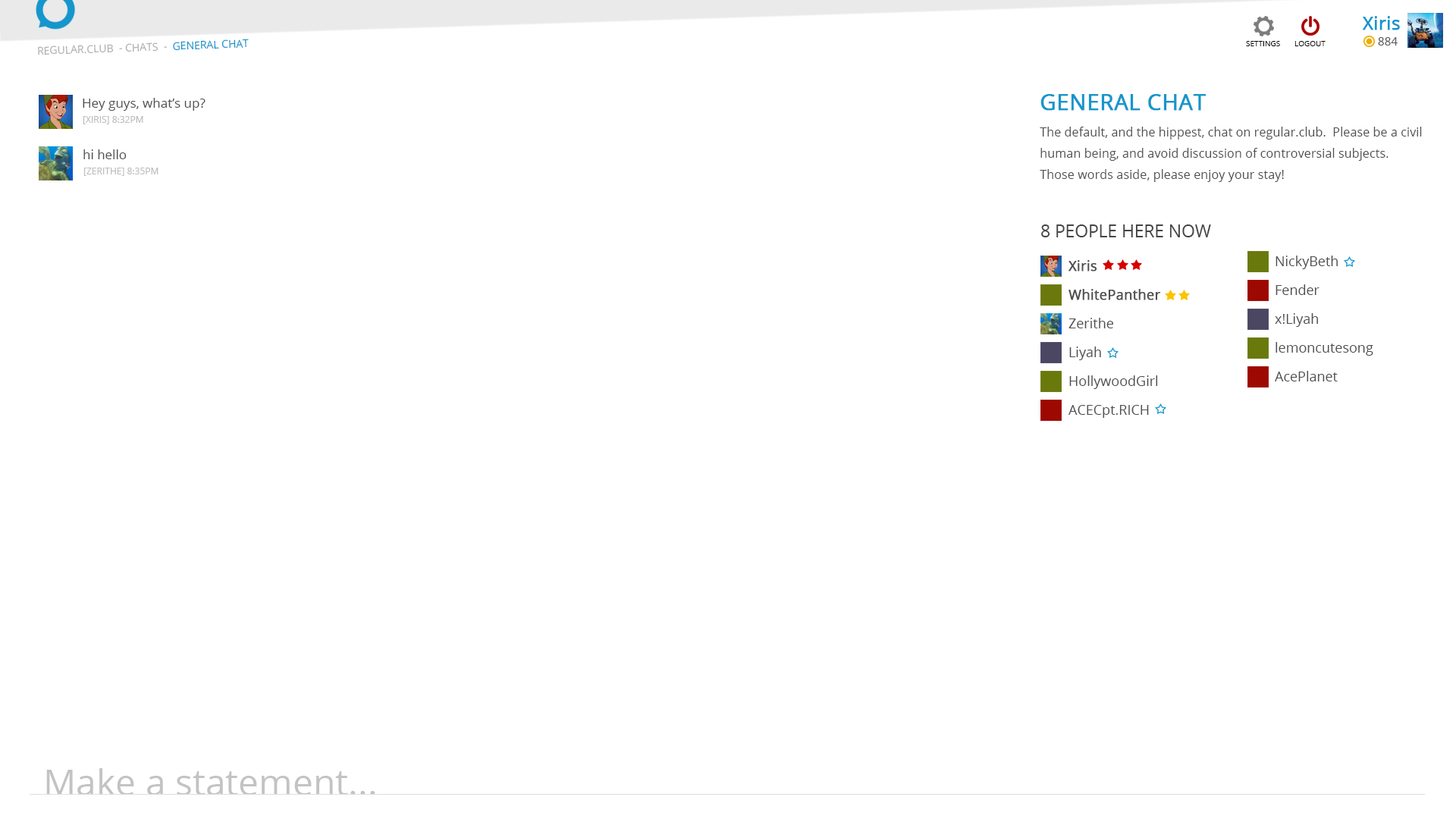
<style>
.page{position:relative;width:1456px;height:819px;background:#ffffff}
.page>*{position:absolute;margin:0}
.t1{font:18px "OpenSans";color:#1596cc;font-weight:bold}
.t2{font:10.6px "OpenSans";color:#b2b2b2}
.t3{font:10.6px "OpenSans";color:#1596cc}
.t4{font:7.6px "OpenSans";color:#000000}
.t5{font:11.7px "OpenSans";color:#585858}
.t6{font:12.9px "OpenSans";color:#4f4f4f}
.t7{font:22.2px "OpenSans";color:#1596cc;font-weight:bold}
.t8{font:9.1px "OpenSans";color:#bdbdbd}
.t9{font:12.4px/21px "OpenSans";color:#4f4f4f}
.t10{font:17.2px "OpenSans";color:#454545}
.t11{font:13.6px/28.8px "OpenSans";color:#4f4f4f}
.t12{font:13.6px/28.8px "OpenSans";color:#4f4f4f;font-weight:bold}
.t13{font:36.4px "OpenSans";color:#c3c3c3}
</style>
<div class="page">
<p class="t1" style="left:1363px;top:16px;width:37px;height:14px">Xiris</p>
<p class="t2" style="left:38px;top:39px;width:211px;height:16px;rotate:-2deg">REGULAR.CLUB  - CHATS  -  <span class="t3">GENERAL CHAT</span></p>
<p class="t4" style="left:1246px;top:41px;width:34px;height:5px">SETTINGS</p>
<p class="t4" style="left:1294px;top:41px;width:32px;height:5px">LOGOUT</p>
<p class="t5" style="left:1378px;top:37px;width:20px;height:8px">884</p>
<p class="t6" style="left:83px;top:98px;width:123px;height:13px">Hey guys, what’s up?</p>
<p class="t7" style="left:1040px;top:94px;width:166px;height:17px">GENERAL CHAT</p>
<p class="t8" style="left:83px;top:116px;width:60px;height:8px">[XIRIS] 8:32PM</p>
<p class="t9" style="left:1040px;top:127px;width:382px;height:55px">The default, and the hippest, chat on regular.club.  Please be a civil human being, and avoid discussion of controversial subjects. Those words aside, please enjoy your stay!</p>
<p class="t6" style="left:83px;top:149px;width:44px;height:10px">hi hello</p>
<p class="t8" style="left:83px;top:168px;width:75px;height:8px">[ZERITHE] 8:35PM</p>
<p class="t10" style="left:1041px;top:224px;width:170px;height:13px">8 PEOPLE HERE NOW</p>
<p class="t11" style="left:1275px;top:256px;width:98px;height:125px">NickyBeth<br>Fender<br>x!Liyah<br>lemoncutesong<br>AcePlanet</p>
<p class="t11" style="left:1068px;top:260px;width:93px;height:158px"><span class="t12">Xiris<br>WhitePanther<br></span>Zerithe<br>Liyah<br>HollywoodGirl<br>ACECpt.RICH</p>
<p class="t13" style="left:46px;top:768px;width:329px;height:27px">Make a statement...</p>
</div>
